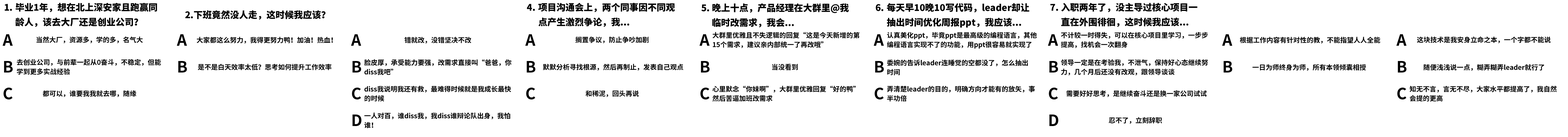
<style>
.page{position:relative;width:1568px;height:137px;background:#ffffff}
.page>*{position:absolute;margin:0}
.t1{font:9.1px "SourceHanSansCN-Heavy";color:#000000}
.t2{font:9.1px/14.7px "SourceHanSansCN-Heavy";color:#000000}
.t3{font:15.6px "SourceHanSansCN-Bold";color:#000000}
.t4{font:6.7px "SourceHanSansCN-Bold";color:#000000}
.t5{font:6.7px/9.4px "SourceHanSansCN-Bold";color:#000000}
</style>
<div class="page">
<p class="t1" style="left:5px;top:4px;width:7px;height:7px">1.</p>
<p class="t2" style="left:16px;top:3px;width:141px;height:24px">毕业1年，想在北上深安家且跑赢同<br>龄人，该去大厂还是创业公司？</p>
<p class="t1" style="left:527px;top:4px;width:8px;height:7px">4.</p>
<p class="t2" style="left:538px;top:3px;width:137px;height:24px">项目沟通会上，两个同事因不同观<br>点产生激烈争论，我...</p>
<p class="t1" style="left:701px;top:4px;width:8px;height:8px">5.</p>
<p class="t2" style="left:712px;top:3px;width:137px;height:25px">晚上十点，产品经理在大群里@我<br>临时改需求，我会...</p>
<p class="t1" style="left:876px;top:4px;width:7px;height:7px">6.</p>
<p class="t2" style="left:887px;top:3px;width:142px;height:25px">每天早10晚10写代码，leader却让<br>抽出时间优化周报ppt，我应该...</p>
<p class="t1" style="left:1050px;top:4px;width:8px;height:7px">7.</p>
<p class="t2" style="left:1061px;top:3px;width:136px;height:24px">入职两年了，没主导过核心项目一<br>直在外围徘徊，这时候我应该...</p>
<p class="t1" style="left:185px;top:10px;width:141px;height:10px">2.下班竟然没人走，这时候我应该？</p>
<p class="t3" style="left:2px;top:34px;width:11px;height:12px">A</p>
<p class="t4" style="left:36px;top:36px;width:107px;height:7px">当然大厂，资源多，学的多，名气大</p>
<p class="t3" style="left:177px;top:34px;width:10px;height:12px">A</p>
<p class="t4" style="left:197px;top:37px;width:136px;height:7px">大家都这么努力，我得更努力鸭！加油！热血！</p>
<p class="t3" style="left:351px;top:34px;width:10px;height:12px">A</p>
<p class="t4" style="left:404px;top:37px;width:67px;height:7px">错就改，没错坚决不改</p>
<p class="t3" style="left:525px;top:34px;width:10px;height:12px">A</p>
<p class="t4" style="left:575px;top:36px;width:74px;height:7px">搁置争议，防止争吵加剧</p>
<p class="t3" style="left:699px;top:34px;width:10px;height:12px">A</p>
<p class="t5" style="left:712px;top:32px;width:148px;height:16px">大群里优雅且不失逻辑的回复“这是今天新增的第15个需求，建议亲内部统一了再改哦”</p>
<p class="t3" style="left:874px;top:34px;width:10px;height:12px">A</p>
<p class="t5" style="left:887px;top:32px;width:150px;height:17px">认真美化ppt，毕竟ppt是最高级的编程语言，其他编程语言实现不了的功能，用ppt很容易就实现了</p>
<p class="t3" style="left:1048px;top:34px;width:10px;height:12px">A</p>
<p class="t5" style="left:1061px;top:32px;width:147px;height:16px">不计较一时得失，可以在核心项目里学习，一步步提高，找机会一次翻身</p>
<p class="t3" style="left:1222px;top:34px;width:10px;height:12px">A</p>
<p class="t4" style="left:1240px;top:37px;width:140px;height:7px">根据工作内容有针对性的教，不能指望人人全能</p>
<p class="t3" style="left:1396px;top:34px;width:10px;height:12px">A</p>
<p class="t4" style="left:1417px;top:36px;width:134px;height:7px">这块技术是我安身立命之本，一个字都不能说</p>
<p class="t3" style="left:4px;top:61px;width:9px;height:12px">B</p>
<p class="t5" style="left:17px;top:59px;width:144px;height:16px">去创业公司，与前辈一起从0奋斗，不稳定，但能学到更多实战经验</p>
<p class="t3" style="left:178px;top:61px;width:9px;height:12px">B</p>
<p class="t4" style="left:198px;top:64px;width:134px;height:6px">是不是白天效率太低？思考如何提升工作效率</p>
<p class="t3" style="left:352px;top:61px;width:9px;height:12px">B</p>
<p class="t5" style="left:364px;top:59px;width:147px;height:16px">脸皮厚，承受能力要强，改需求直接叫“爸爸，你diss我吧”</p>
<p class="t3" style="left:527px;top:61px;width:9px;height:12px">B</p>
<p class="t4" style="left:543px;top:64px;width:140px;height:7px">默默分析寻找根源，然后再制止，发表自己观点</p>
<p class="t3" style="left:701px;top:61px;width:9px;height:12px">B</p>
<p class="t4" style="left:772px;top:64px;width:26px;height:6px">当没看到</p>
<p class="t3" style="left:875px;top:61px;width:9px;height:12px">B</p>
<p class="t5" style="left:887px;top:60px;width:141px;height:16px">委婉的告诉leader连睡觉的空都没了，怎么抽出时间</p>
<p class="t3" style="left:1049px;top:61px;width:9px;height:12px">B</p>
<p class="t5" style="left:1061px;top:59px;width:147px;height:17px">领导一定是在考验我，不泄气，保持好心态继续努力，几个月后还没有改观，跟领导谈谈</p>
<p class="t3" style="left:1224px;top:61px;width:8px;height:12px">B</p>
<p class="t4" style="left:1253px;top:64px;width:113px;height:7px">一日为师终身为师，所有本领倾囊相授</p>
<p class="t3" style="left:1398px;top:61px;width:9px;height:12px">B</p>
<p class="t4" style="left:1424px;top:64px;width:120px;height:7px">随便浅浅说一点，糊弄糊弄leader就行了</p>
<p class="t3" style="left:3px;top:88px;width:10px;height:12px">C</p>
<p class="t3" style="left:352px;top:88px;width:9px;height:12px">C</p>
<p class="t5" style="left:364px;top:86px;width:147px;height:16px">diss我说明我还有救，最难得时候就是我成长最快的时候</p>
<p class="t3" style="left:526px;top:88px;width:9px;height:12px">C</p>
<p class="t3" style="left:700px;top:88px;width:9px;height:12px">C</p>
<p class="t5" style="left:712px;top:86px;width:144px;height:16px">心里默念“你妹啊”，大群里优雅回复“好的鸭”然后苦逼加班改需求</p>
<p class="t3" style="left:875px;top:88px;width:9px;height:12px">C</p>
<p class="t5" style="left:887px;top:86px;width:148px;height:16px">弄清楚leader的目的，明确方向才能有的放矢，事半功倍</p>
<p class="t3" style="left:1049px;top:88px;width:9px;height:12px">C</p>
<p class="t3" style="left:1397px;top:88px;width:9px;height:12px">C</p>
<p class="t5" style="left:1410px;top:86px;width:147px;height:16px">知无不言，言无不尽，大家水平都提高了，我自然会提的更高</p>
<p class="t4" style="left:43px;top:90px;width:93px;height:7px">都可以，谁要我我就去哪，随缘</p>
<p class="t4" style="left:585px;top:90px;width:54px;height:7px">和稀泥，回头再说</p>
<p class="t4" style="left:1067px;top:90px;width:140px;height:7px">需要好好思考，是继续奋斗还是换一家公司试试</p>
<p class="t5" style="left:364px;top:113px;width:146px;height:15px">一人对百，谁diss我，我diss谁辩论队出身，我怕谁！</p>
<p class="t3" style="left:352px;top:115px;width:10px;height:11px">D</p>
<p class="t3" style="left:1049px;top:115px;width:9px;height:11px">D</p>
<p class="t4" style="left:1109px;top:117px;width:53px;height:7px">忍不了，立刻辞职</p>
</div>
